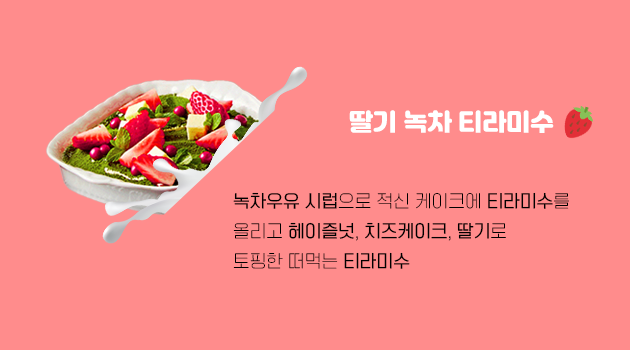
<style>
.page{position:relative;width:630px;height:350px;background:#ff8c8c}
.page>*{position:absolute;margin:0}
.t1{font:24px "Jalnan";color:#ffffff}
.t2{font:17px/30px "TTOmniGothicT";color:#000000}
.t3{font:17px/30px "TTOmniGothicM";color:#000000}
</style>
<div class="page">
<p class="t1" style="left:349px;top:110px;width:205px;height:23px">딸기 녹차 티라미수</p>
<p class="t2" style="left:233px;top:192px;width:336px;height:77px"><span class="t3">녹차우유 시럽</span>으로 적신 케이크에 <span class="t3">티라미수</span>를 올리고 <span class="t3">헤이즐넛</span>, <span class="t3">치즈케이크</span>, <span class="t3">딸기</span>로 <br>토핑한 떠먹는 <span class="t3">티라미수</span></p>
</div>
